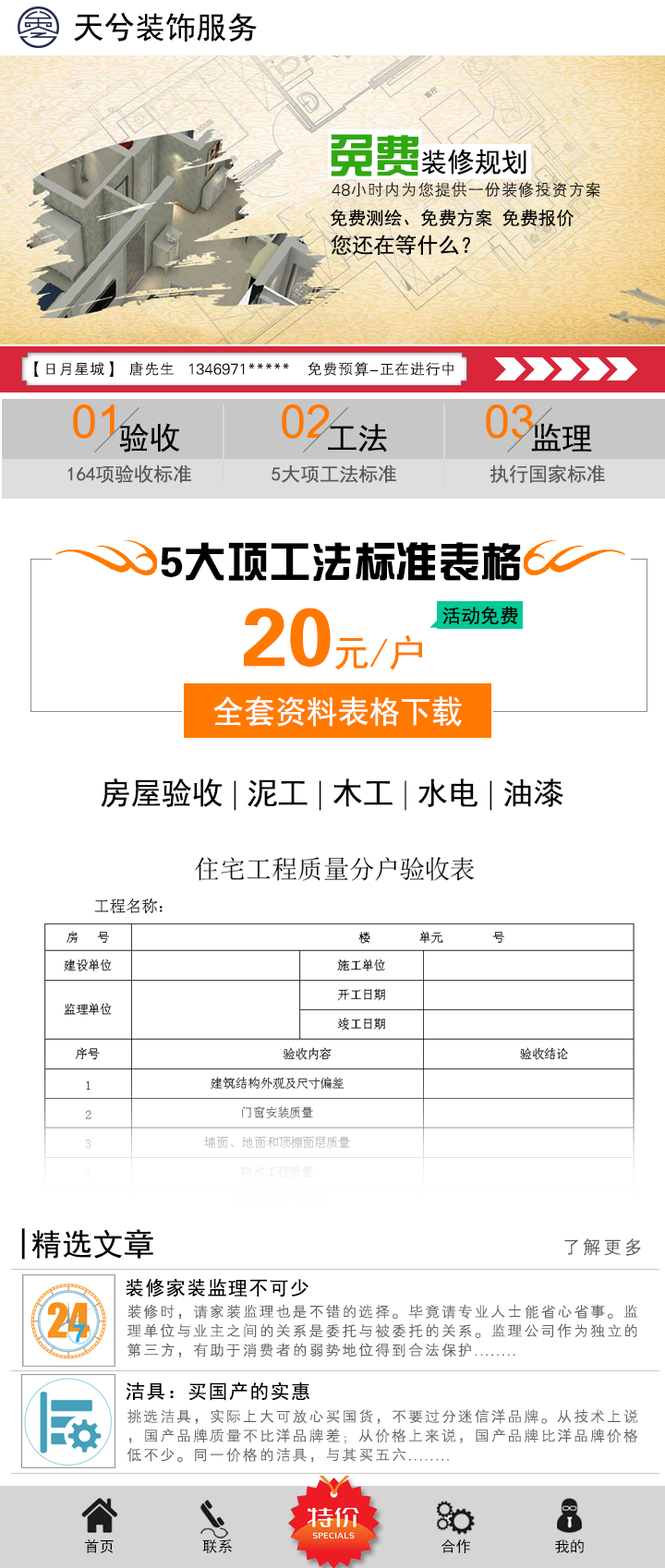
<style>
.page{position:relative;width:665px;height:1568px;background:#ffffff}
.page>*{position:absolute;margin:0}
.t1{font:30.8px "SimHei";color:#000000}
.t2{font:27.1px "SimHei";color:#000000}
.t3{font:45.6px "FZZYJW--GB1-0";color:#2fa90e}
.t4{font:16.7px "FZXH1JW--GB1-0";color:#141414}
.t5{font:18.1px "SimHei";color:#000000}
.t6{font:21.5px "SimHei";color:#000000}
.t7{font:15.4px "FZXH1JW--GB1-0";color:#080808}
.t8{font:46.2px "ArialMT";color:#ff7900}
.t9{font:19.2px "SimHei";color:#5a5a5a}
.t10{font:42.3px "FZZYJW--GB1-0";color:#000000}
.t11{font:19.2px "SimHei";color:#000000}
.t12{font:37.2px "SimHei";color:#ff7900}
.t13{font:81.8px "FZZYJW--GB1-0";color:#ff7900}
.t14{font:31.8px "SimHei";color:#ffffff}
.t15{font:30.8px "FZXQJW--GB1-0";color:#000000}
.t16{font:19.2px "FZXH1JW--GB1-0";letter-spacing:0.075em;color:#5a5a5a}
.t17{font:19.2px "SimHei";letter-spacing:0.075em;color:#000000}
.t18{font:15.4px/19.2px "FZXH1JW--GB1-0";letter-spacing:0.075em;color:#636363}
.t19{font:19.2px/23.1px "SimHei";letter-spacing:0.075em;color:#000000}
.t20{font:15px "SimHei";color:#000000}
</style>
<div class="page">
<p class="t1" style="left:74px;top:12px;width:183px;height:30px">天兮装饰服务</p>
<p class="t2" style="left:331px;top:134px;width:195px;height:42px"><span class="t3">免费</span>装修规划</p>
<p class="t4" style="left:332px;top:182px;width:268px;height:16px">48小时内为您提供一份装修投资方案</p>
<p class="t5" style="left:330px;top:209px;width:244px;height:18px">免费测绘、免费方案 免费报价</p>
<p class="t6" style="left:331px;top:235px;width:139px;height:20px">您还在等什么？</p>
<p class="t7" style="left:34px;top:361px;width:419px;height:16px">【日月星城】  唐先生   1346971*****    免费预算-正在进行中</p>
<p class="t8" style="left:73px;top:404px;width:42px;height:35px">01</p>
<p class="t8" style="left:282px;top:404px;width:48px;height:35px">02</p>
<p class="t8" style="left:486px;top:404px;width:48px;height:35px">03</p>
<p class="t1" style="left:119px;top:423px;width:61px;height:29px">验收</p>
<p class="t1" style="left:328px;top:424px;width:59px;height:28px">工法</p>
<p class="t1" style="left:531px;top:423px;width:61px;height:29px">监理</p>
<p class="t9" style="left:67px;top:464px;width:124px;height:19px">164项验收标准</p>
<p class="t9" style="left:271px;top:464px;width:125px;height:19px">5大项工法标准</p>
<p class="t9" style="left:489px;top:464px;width:116px;height:19px">执行国家标准</p>
<p class="t10" style="left:161px;top:542px;width:360px;height:39px">5大项工法标准表格</p>
<p class="t11" style="left:442px;top:606px;width:76px;height:19px">活动免费</p>
<p class="t12" style="left:244px;top:608px;width:178px;height:62px"><span class="t13">20</span>元/户</p>
<p class="t14" style="left:213px;top:696px;width:249px;height:31px">全套资料表格下载</p>
<p class="t1" style="left:101px;top:778px;width:462px;height:33px">房屋验收<span class="t15"> | </span>泥工<span class="t15"> | </span>木工<span class="t15"> | </span>水电<span class="t15"> | </span>油漆</p>
<p class="t1" style="left:21px;top:1228px;width:132px;height:32px">|精选文章</p>
<p class="t16" style="left:564px;top:1238px;width:77px;height:18px">了解更多</p>
<p class="t17" style="left:126px;top:1278px;width:182px;height:19px">装修家装监理不可少</p>
<p class="t18" style="left:127px;top:1304px;width:510px;height:53px"><span class="t19"><br></span>装修时，请家装监理也是不错的选择。毕竟请专业人士能省心省事。监<br>理单位与业主之间的关系是委托与被委托的关系。监理公司作为独立的<br>第三方，有助于消费者的弱势地位得到合法保护........</p>
<p class="t17" style="left:126px;top:1381px;width:184px;height:20px">洁具：买国产的实惠</p>
<p class="t18" style="left:127px;top:1409px;width:511px;height:54px">挑选洁具，实际上大可放心买国货，不要过分迷信洋品牌。从技术上说<br>，国产品牌质量不比洋品牌差；从价格上来说，国产品牌比洋品牌价格<br>低不少。同一价格的洁具，与其买五六........</p>
<p class="t20" style="left:85px;top:1539px;width:29px;height:14px">首页</p>
<p class="t20" style="left:202px;top:1539px;width:30px;height:14px">联系</p>
<p class="t20" style="left:441px;top:1538px;width:29px;height:15px">合作</p>
<p class="t20" style="left:555px;top:1539px;width:29px;height:14px">我的</p>
</div>
